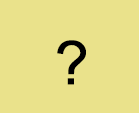
<style>
.page{position:relative;width:139px;height:113px;background:#eae28b}
.page>*{position:absolute;margin:0}
.t1{font:60px "ArialMT";color:#000000;font-weight:bold}
</style>
<div class="page">
<p class="t1" style="left:57px;top:40px;width:29px;height:45px">?</p>
</div>
